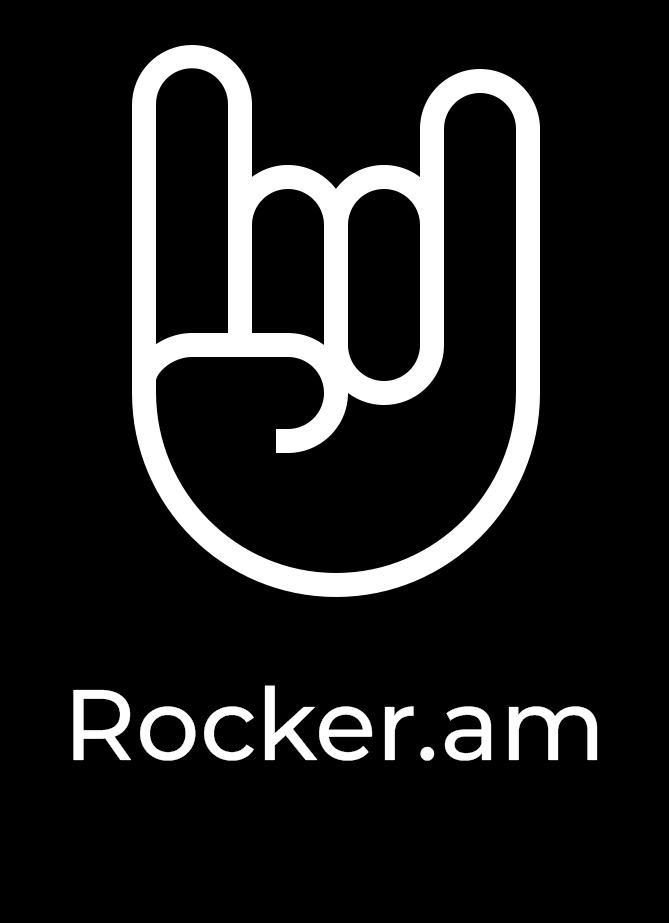
<style>
.page{position:relative;width:669px;height:923px;background:#000000}
.page>*{position:absolute;margin:0}
.t1{font:100px "Montserrat-Medium";color:#ffffff}
</style>
<div class="page">
<p class="t1" style="left:73px;top:685px;width:525px;height:76px">Rocker.am</p>
</div>
